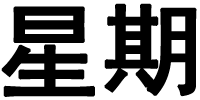
<style>
.page{position:relative;width:200px;height:100px;background:#000000}
.page>*{position:absolute;margin:0}
.t1{font:100px "SimHei";color:#000000;font-weight:bold}
</style>
<div class="page">
<p class="t1" style="left:1px;top:3px;width:196px;height:94px">星期</p>
</div>
